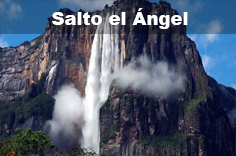
<style>
.page{position:relative;width:236px;height:156px}
.page>*{position:absolute;margin:0}
.t1{font:18px "Arial-Black";color:#ffffff}
</style>
<div class="page">
<p class="t1" style="left:52px;top:8px;width:136px;height:21px">Salto el Ángel</p>
</div>
